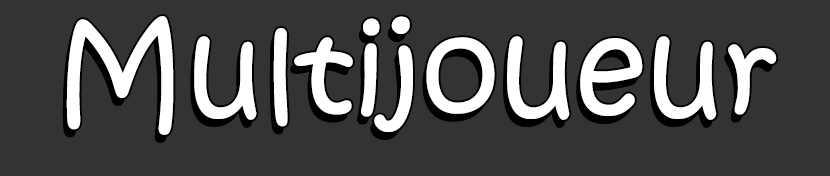
<style>
.page{position:relative;width:830px;height:176px;background:#333333}
.page>*{position:absolute;margin:0}
.t1{font:124.4px "KristenITC-Regular";color:#ffffff}
</style>
<div class="page">
<p class="t1" style="left:66px;top:16px;width:711px;height:119px">Multijoueur</p>
</div>
